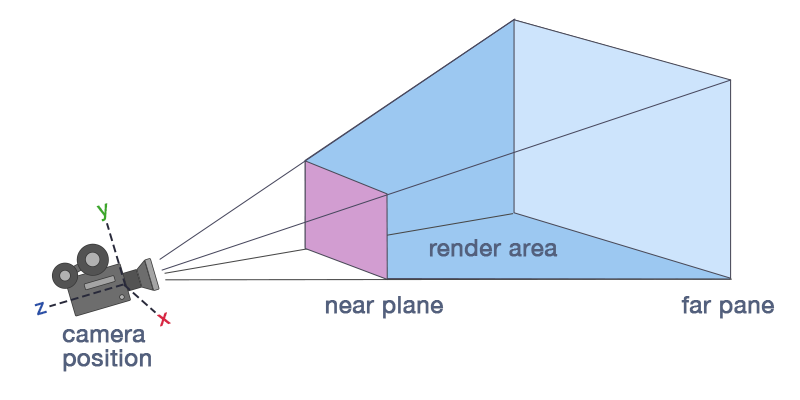
<style>
.page{position:relative;width:800px;height:400px;background:#ffffff}
.page>*{position:absolute;margin:0}
.t1{font:21.4px "HelveticaNeue";color:#3ca72a;font-weight:bold}
.t2{font:24px "HelveticaNeue";color:#53607d;font-weight:bold}
.t3{font:21.4px "HelveticaNeue";color:#2a50a7;font-weight:bold}
.t4{font:21.4px "HelveticaNeue";color:#d82543;font-weight:bold}
.t5{font:24px/24px "HelveticaNeue";color:#53607d;font-weight:bold}
</style>
<div class="page">
<p class="t1" style="left:96px;top:203px;width:12px;height:19px;rotate:-16deg">y</p>
<p class="t2" style="left:429px;top:239px;width:129px;height:18px">render area</p>
<p class="t3" style="left:34px;top:301px;width:13px;height:15px;rotate:-16deg">z</p>
<p class="t2" style="left:325px;top:296px;width:119px;height:23px">near plane</p>
<p class="t2" style="left:681px;top:296px;width:94px;height:23px">far pane</p>
<p class="t4" style="left:157px;top:312px;width:14px;height:15px;rotate:-16deg">x</p>
<p class="t5" style="left:62px;top:329px;width:89px;height:43px">camera <br>position</p>
</div>
